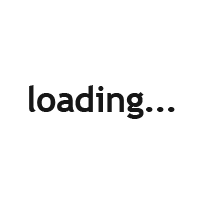
<style>
.page{position:relative;width:200px;height:200px;background:#ffffff}
.page>*{position:absolute;margin:0}
.t1{font:36px "TrebuchetMS-Bold";color:#171717}
</style>
<div class="page">
<p class="t1" style="left:29px;top:85px;width:146px;height:34px">loading...</p>
</div>
